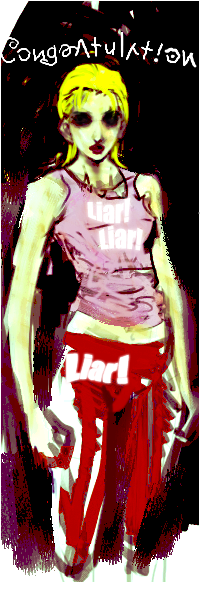
<style>
.page{position:relative;width:200px;height:600px;background:#000000}
.page>*{position:absolute;margin:0}
.t1{font:24px "Impact";color:#ffffff}
.t2{font:36px "Impact";color:#ffffff}
</style>
<div class="page">
<p class="t1" style="left:87px;top:198px;width:44px;height:26px">Liar!</p>
<p class="t1" style="left:98px;top:225px;width:45px;height:26px">Liar!</p>
<p class="t2" style="left:66px;top:353px;width:63px;height:31px">Liar!</p>
</div>
